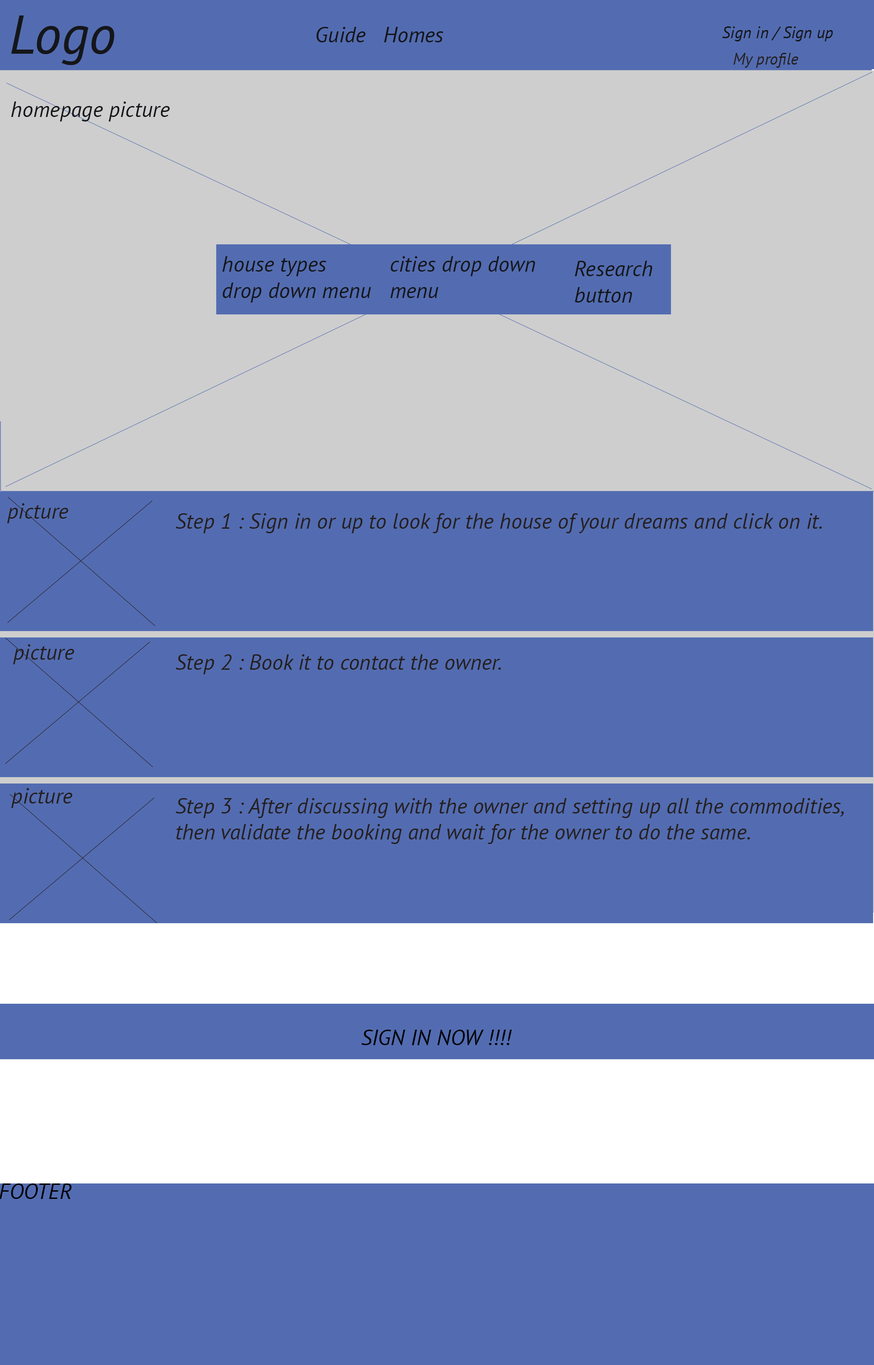
<style>
.page{position:relative;width:874px;height:1365px;background:#536cb1}
.page>*{position:absolute;margin:0}
.t1{font:16.4px "PTSans-Italic";color:#251f1f}
.t2{font:21.8px "PTSans-Italic";color:#15161a}
.t3{font:21.8px "PTSans-Italic";color:#251f1f}
.t4{font:21.8px "PTSans-Italic";color:#000000}
.t5{font:21.8px "PTSans-Italic";color:#536cb1}
</style>
<div class="page">
<p class="t1" style="left:733px;top:53px;width:65px;height:15px">My profile</p>
<p class="t2" style="left:11px;top:101px;width:159px;height:20px">homepage picture</p>
<p class="t2" style="left:222px;top:256px;width:149px;height:47px">house types <br>drop down menu</p>
<p class="t2" style="left:390px;top:256px;width:145px;height:42px">cities drop down<br>menu</p>
<p class="t2" style="left:574px;top:261px;width:78px;height:42px">Research<br>button</p>
<p class="t3" style="left:7px;top:503px;width:61px;height:20px">picture</p>
<p class="t3" style="left:175px;top:513px;width:647px;height:20px">Step 1 : Sign in or up to look for the house of your dreams and click on it.</p>
<p class="t3" style="left:13px;top:644px;width:61px;height:20px">picture</p>
<p class="t3" style="left:175px;top:654px;width:326px;height:20px">Step 2 : Book it to contact the owner.</p>
<p class="t3" style="left:11px;top:788px;width:61px;height:20px">picture</p>
<p class="t3" style="left:175px;top:798px;width:669px;height:46px">Step 3 : After discussing with the owner and setting up all the commodities, then validate the booking and wait for the owner to do the same.</p>
<p class="t4" style="left:361px;top:1004px;width:151px;height:41px;text-align:center"><span class="t5">S</span><br>SIGN IN NOW !!!!</p>
<p class="t4" style="left:0px;top:1183px;width:72px;height:16px">FOOTER</p>
</div>
